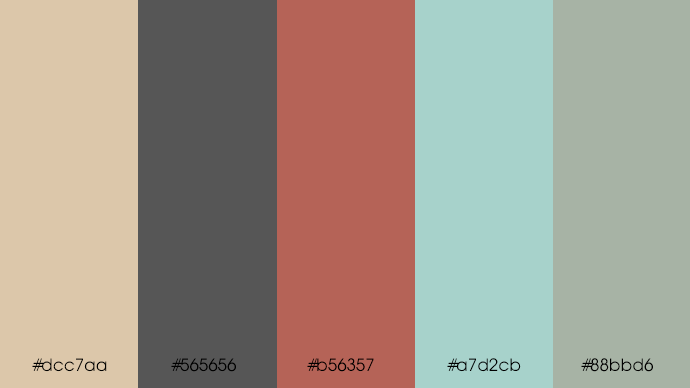
<style>
.page{position:relative;width:690px;height:388px;background:#dcc7aa}
.page>*{position:absolute;margin:0}
.t1{font:18.8px "AvantGarde";color:#000000}
</style>
<div class="page">
<p class="t1" style="left:32px;top:358px;width:75px;height:14px">#dcc7aa</p>
<p class="t1" style="left:171px;top:358px;width:65px;height:14px">#565656</p>
<p class="t1" style="left:307px;top:358px;width:67px;height:14px">#b56357</p>
<p class="t1" style="left:447px;top:358px;width:74px;height:14px">#a7d2cb</p>
<p class="t1" style="left:581px;top:358px;width:72px;height:14px">#88bbd6</p>
</div>
